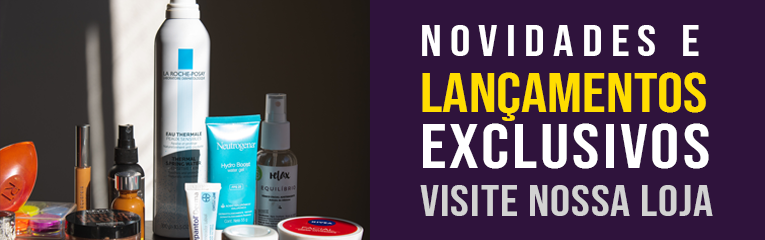
<style>
.page{position:relative;width:765px;height:240px;background:#2f133c}
.page>*{position:absolute;margin:0}
.t1{font:43px/48px "BebasNeue-Regular";letter-spacing:0.02em;color:#d2d2d2;scale:1.16 1}
.t2{font:44px/48px "BebasNeue-Regular";letter-spacing:0.16em;color:#ffffff;scale:1.16 1}
.t3{font:44px/48px "BebasNeue-Regular";color:#ffffff;scale:1.16 1}
.t4{font:56px/56px "BebasNeue-Regular";color:#ffdd00;scale:1.16 1}
.t5{font:63px/56px "BebasNeue-Regular";letter-spacing:0.04em;color:#ffffff;scale:1.16 1}
</style>
<div class="page">
<p class="t1" style="left:420px;top:25px;width:293px;height:191px"><span class="t2">NOVIDADES E</span><span class="t3"> <br></span><span class="t4">LANÇAMENTOS<br></span><span class="t5">EXCLUSIVOS<br></span>VISITE NOSSA LOJA</p>
</div>
